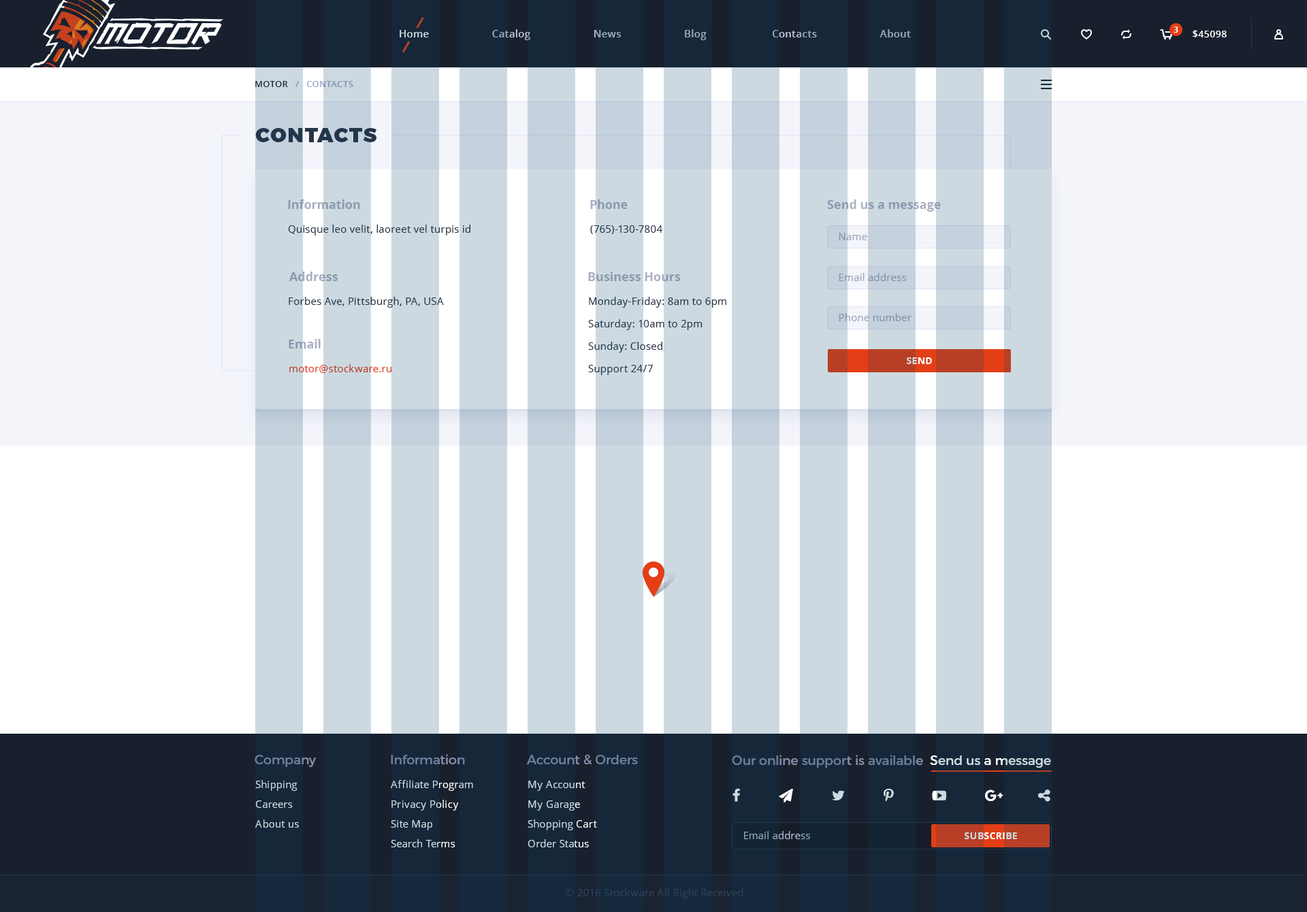
<style>
.page{position:relative;width:1307px;height:912px;background:#cdd9e0}
.page>*{position:absolute;margin:0}
.t1{font:10.2px "OpenSans-Semibold";letter-spacing:0.02em}
.t2{font:8.2px "OpenSans-Bold";color:#ffffff}
.t3{font:9.5px "OpenSans-Semibold";letter-spacing:0.02em;color:#ffffff;text-transform:uppercase}
.t4{font:8.9px "OpenSans-Semibold";letter-spacing:0.02em;text-transform:uppercase}
.t5{font:20.4px "Montserrat-Black";letter-spacing:0.06em;color:#283346;text-transform:uppercase}
.t6{font:12.3px "OpenSans-Bold";color:#8a99af}
.t7{font:12.3px "OpenSans-Bold"}
.t8{font:10.2px "OpenSans";letter-spacing:0.02em;color:#283346}
.t9{font:10.2px "OpenSans";letter-spacing:0.02em;color:#9fa4bb}
.t10{font:10.2px "OpenSans";letter-spacing:0.02em;color:#8191a9}
.t11{font:10.2px/22.5px "OpenSans";letter-spacing:0.02em;color:#283346}
.t12{font:10.2px "OpenSans";letter-spacing:0.02em}
.t13{font:9.5px "OpenSans-Bold";letter-spacing:0.02em;color:#ffffff}
.t14{font:12.9px "Montserrat-Regular";color:#6d7d99}
.t15{font:12.9px "Montserrat-Regular"}
.t16{font:10.2px/19.7px "OpenSans";letter-spacing:0.02em;color:#cdd9e0}
.t17{font:9.5px "OpenSans-Bold";letter-spacing:0.02em}
.t18{font:10.2px "OpenSans";letter-spacing:0.02em;color:#324057}
</style>
<div class="page">
<p class="t1" style="left:400px;top:29px;width:511px;height:11px">Home                      Catalog                      News                      Blog                       Contacts                      About</p>
<p class="t2" style="left:1174px;top:27px;width:4px;height:6px">3</p>
<p class="t3" style="left:1193px;top:30px;width:34px;height:7px">$45098</p>
<p class="t4" style="left:255px;top:81px;width:98px;height:6px">Motor   /   Contacts</p>
<p class="t5" style="left:255px;top:128px;width:122px;height:14px">contacts</p>
<p class="t6" style="left:288px;top:199px;width:72px;height:10px">Information</p>
<p class="t6" style="left:590px;top:199px;width:38px;height:10px">Phone</p>
<p class="t7" style="left:827px;top:199px;width:114px;height:13px">Send us a message</p>
<p class="t8" style="left:288px;top:225px;width:182px;height:11px">Quisque leo velit, laoreet vel turpis id</p>
<p class="t8" style="left:590px;top:225px;width:73px;height:9px">(765)-130-7804</p>
<p class="t9" style="left:839px;top:233px;width:28px;height:7px">Name</p>
<p class="t7" style="left:289px;top:272px;width:49px;height:9px">Address</p>
<p class="t7" style="left:588px;top:272px;width:93px;height:9px">Business Hours</p>
<p class="t10" style="left:839px;top:273px;width:68px;height:8px">Email address</p>
<p class="t8" style="left:289px;top:297px;width:155px;height:11px">Forbes Ave, Pittsburgh, PA, USA</p>
<p class="t11" style="left:588px;top:297px;width:138px;height:78px">Monday-Friday: 8am to 6pm<br>Saturday: 10am to 2pm<br>Sunday: Closed<br>Support 24/7</p>
<p class="t10" style="left:839px;top:313px;width:73px;height:8px">Phone number</p>
<p class="t7" style="left:289px;top:339px;width:32px;height:10px">Email</p>
<p class="t12" style="left:289px;top:364px;width:102px;height:9px">motor@stockware.ru</p>
<p class="t13" style="left:907px;top:357px;width:25px;height:7px">SEND</p>
<p class="t14" style="left:255px;top:755px;width:61px;height:12px">Company</p>
<p class="t14" style="left:391px;top:754px;width:74px;height:11px">Information</p>
<p class="t14" style="left:527px;top:755px;width:111px;height:10px">Account &amp; Orders</p>
<p class="t15" style="left:732px;top:755px;width:319px;height:13px">Our online support is available  Send us a message</p>
<p class="t16" style="left:255px;top:780px;width:44px;height:48px">Shipping<br>Careers<br>About us</p>
<p class="t16" style="left:391px;top:780px;width:82px;height:68px">Affiliate Program<br>Privacy Policy<br>Site Map<br>Search Terms</p>
<p class="t16" style="left:528px;top:781px;width:69px;height:67px">My Account<br>My Garage<br>Shopping Cart<br>Order Status</p>
<p class="t12" style="left:744px;top:831px;width:66px;height:8px">Email address</p>
<p class="t17" style="left:965px;top:833px;width:52px;height:6px">SUBSCRIBE</p>
<p class="t18" style="left:565px;top:888px;width:178px;height:11px">© 2016 Stockware All Right Received</p>
</div>
